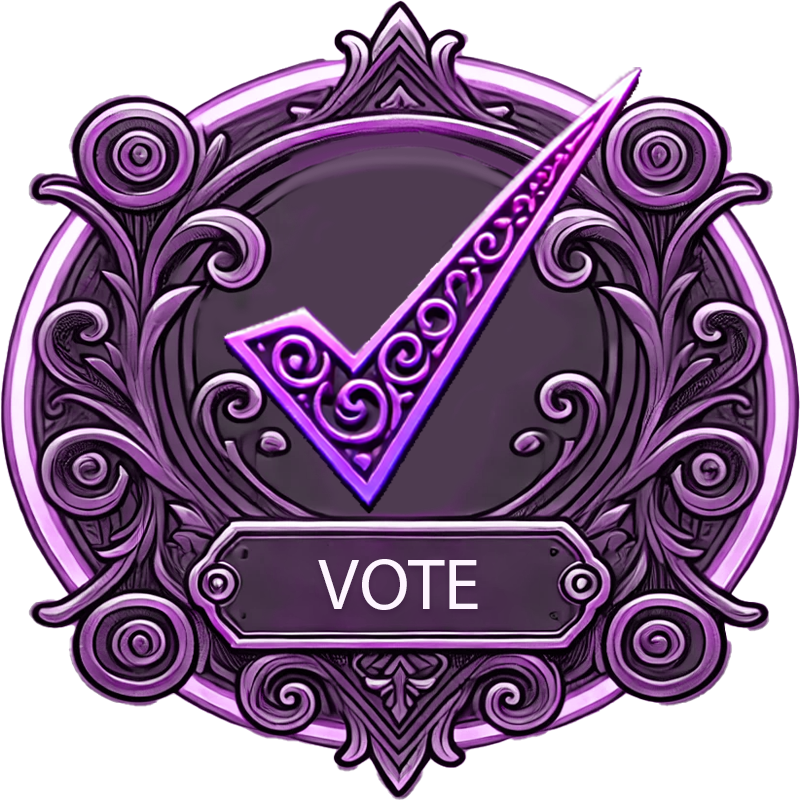
<style>
.page{position:relative;width:800px;height:800px;background:#ffffff}
.page>*{position:absolute;margin:0}
.t1{font:73.3px "MyriadPro-Regular";color:#fef5ff}
</style>
<div class="page">
<p class="t1" style="left:318px;top:559px;width:160px;height:51px">VOTE</p>
</div>
